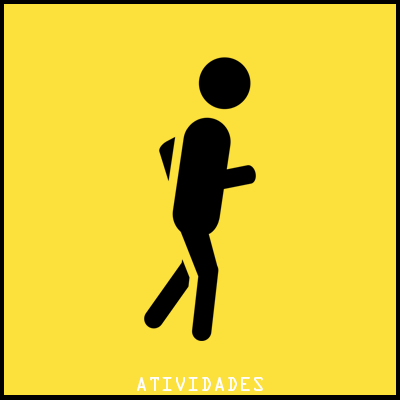
<style>
.page{position:relative;width:400px;height:400px;background:#fce13c}
.page>*{position:absolute;margin:0}
.t1{font:18px "OCRAStd";color:#ffffff}
</style>
<div class="page">
<p class="t1" style="left:137px;top:377px;width:126px;height:14px">ATIVIDADES</p>
</div>
